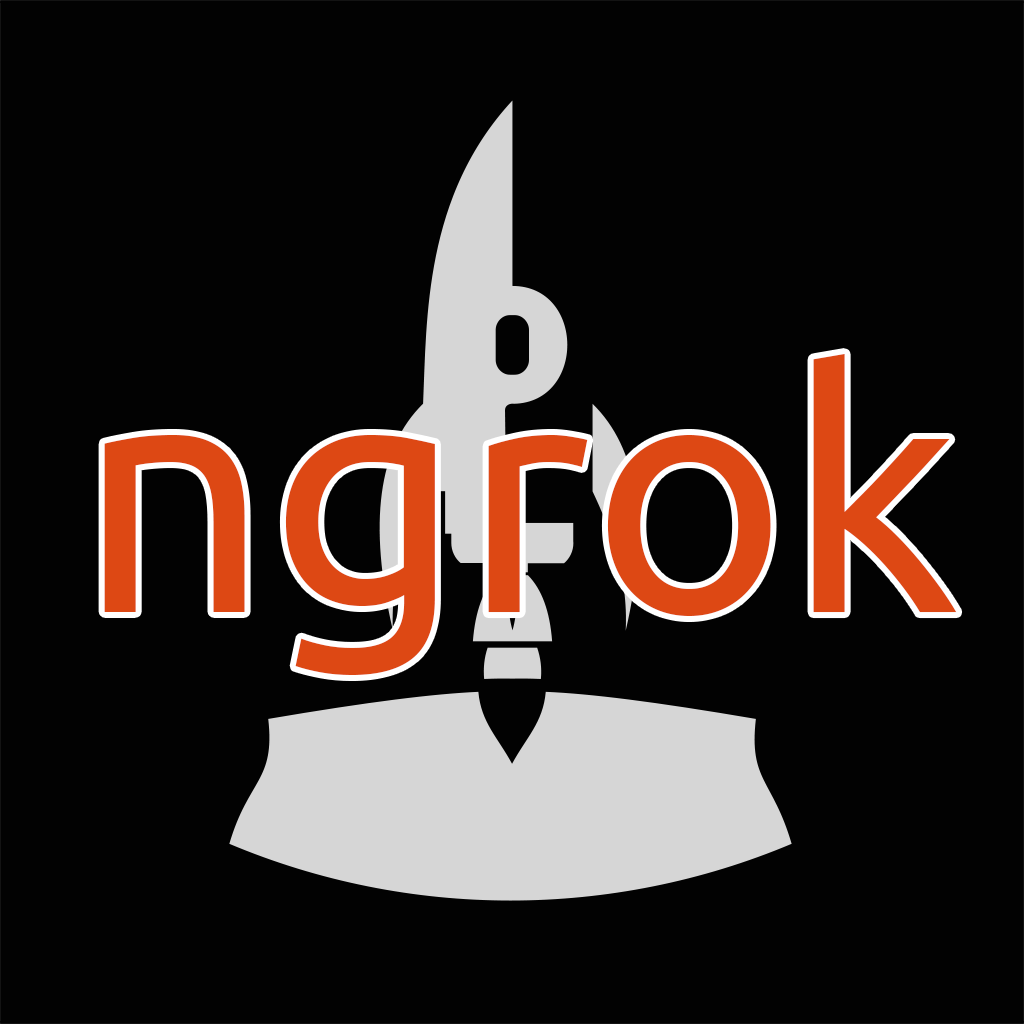
<style>
.page{position:relative;width:1024px;height:1024px;background:#020202}
.page>*{position:absolute;margin:0}
.t1{font:333.3px "Ubuntu";color:#dd4814}
</style>
<div class="page">
<p class="t1" style="left:104px;top:354px;width:853px;height:321px">ngrok</p>
</div>
